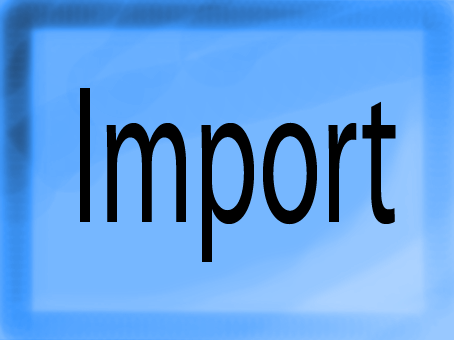
<style>
.page{position:relative;width:454px;height:340px}
.page>*{position:absolute;margin:0}
.t1{font:199.5px "MyriadPro-Regular";color:#000000;scale:0.57 1}
</style>
<div class="page">
<p class="t1" style="left:80px;top:88px;width:316px;height:174px">Import</p>
</div>
